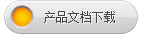
<style>
.page{position:relative;width:142px;height:34px}
.page>*{position:absolute;margin:0}
.t1{font:12px "SimSun";color:#454444}
</style>
<div class="page">
<p class="t1" style="left:44px;top:11px;width:71px;height:12px">产品文档下载</p>
</div>
